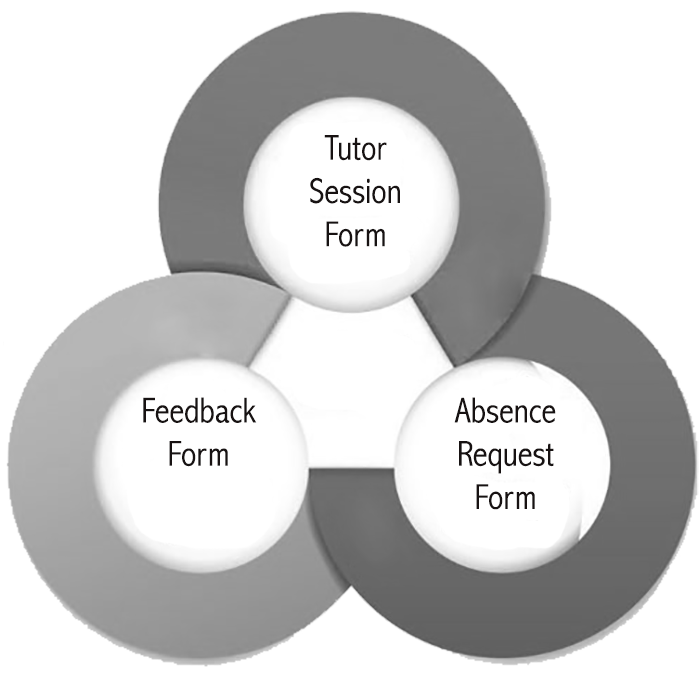
<style>
.page{position:relative;width:700px;height:683px;background:#ffffff}
.page>*{position:absolute;margin:0}
.t1{font:36px "AbadiMT-CondensedLight";color:#171212}
</style>
<div class="page">
<p class="t1" style="left:310px;top:135px;width:90px;height:112px;text-align:center">Tutor<br>Session<br>Form</p>
<p class="t1" style="left:143px;top:397px;width:114px;height:70px;text-align:center">Feedback<br>Form</p>
<p class="t1" style="left:454px;top:397px;width:102px;height:113px;text-align:center">Absence<br>Request<br>Form</p>
</div>
